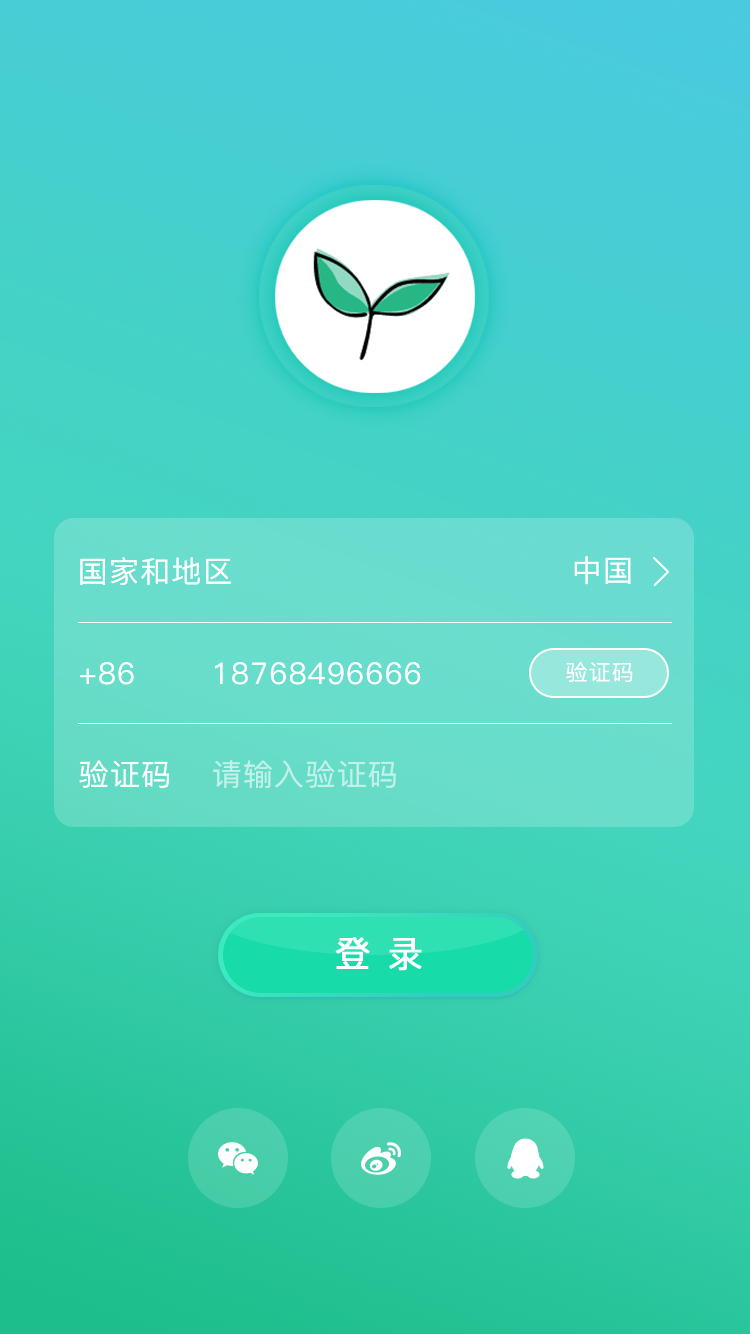
<style>
.page{position:relative;width:750px;height:1334px}
.page>*{position:absolute;margin:0}
.t1{font:30px "PingFang-SC-Medium";letter-spacing:0.04em;color:#ffffff}
.t2{font:22px "PingFang-SC-Medium";letter-spacing:0.04em;color:#ffffff}
.t3{font:30px "PingFang-SC-Medium";letter-spacing:0.04em;color:#c2f1e9}
.t4{font:36px "PingFang-SC-Medium";letter-spacing:0.04em;color:#ffffff;font-weight:bold}
</style>
<div class="page">
<p class="t1" style="left:80px;top:557px;width:151px;height:28px">国家和地区</p>
<p class="t1" style="left:574px;top:556px;width:57px;height:29px">中国</p>
<p class="t1" style="left:80px;top:662px;width:54px;height:23px">+86</p>
<p class="t1" style="left:215px;top:662px;width:206px;height:23px">18768496666</p>
<p class="t2" style="left:566px;top:662px;width:67px;height:20px">验证码</p>
<p class="t1" style="left:79px;top:760px;width:90px;height:28px">验证码</p>
<p class="t3" style="left:213px;top:760px;width:183px;height:28px">请输入验证码</p>
<p class="t4" style="left:335px;top:937px;width:87px;height:34px">登 录</p>
</div>
